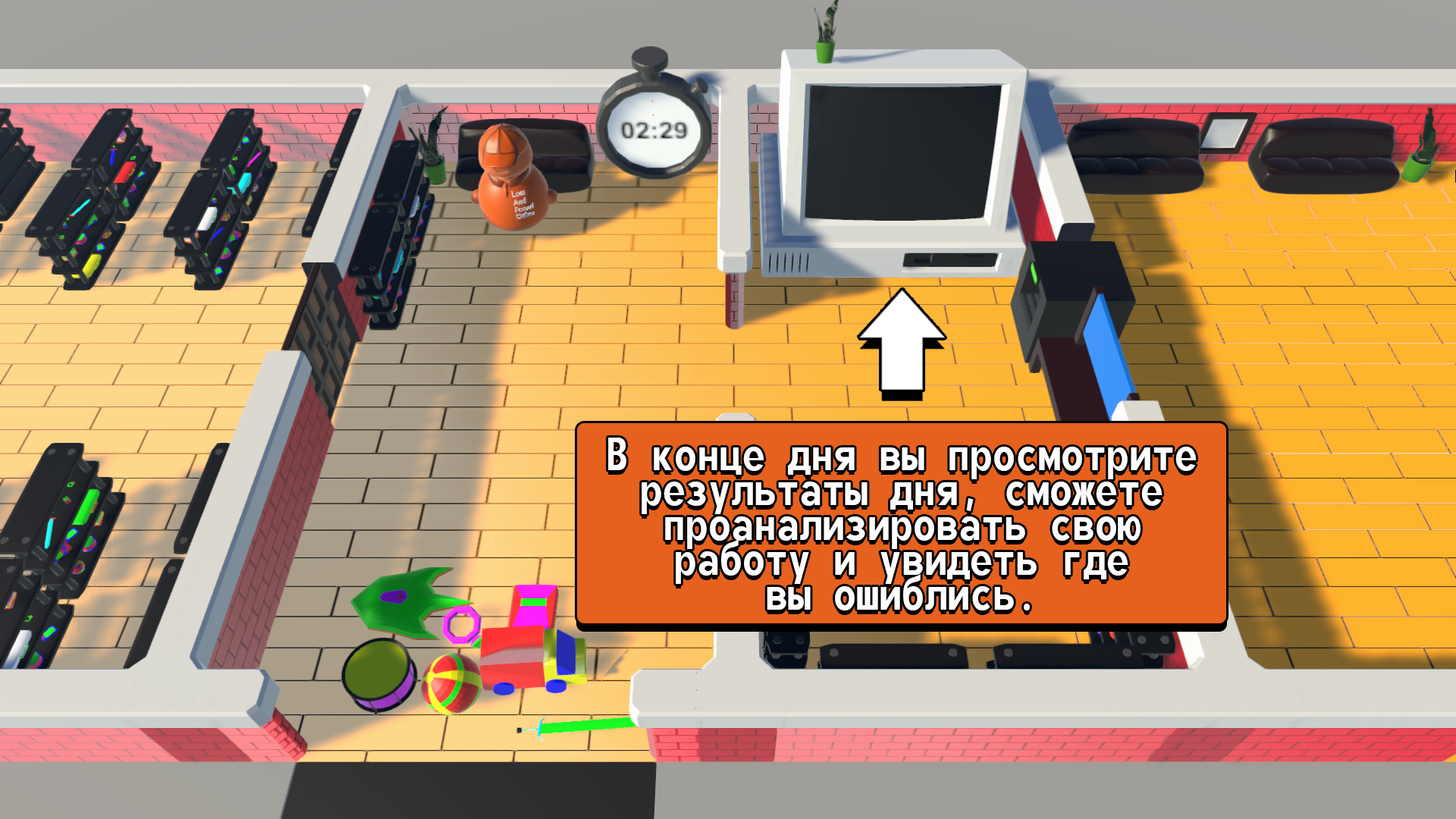
<style>
.page{position:relative;width:1456px;height:819px}
.page>*{position:absolute;margin:0}
.t1{font:56.9px/34.8px "MonofontoRUSBYMelman-Regular";color:#fdfefd}
</style>
<div class="page">
<p class="t1" style="left:608px;top:438px;width:589px;height:172px;text-align:center">В конце дня вы просмотрите<br>результаты дня, сможете<br>проанализировать свою<br>работу и увидеть где<br>вы ошиблись.</p>
</div>
